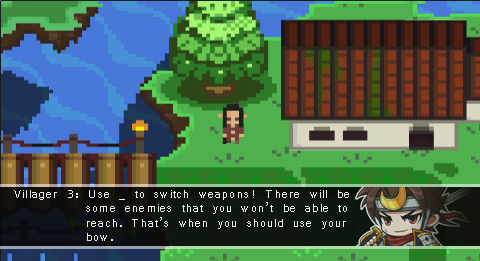
<style>
.page{position:relative;width:480px;height:261px}
.page>*{position:absolute;margin:0}
.t1{font:12px "Vrinda";letter-spacing:0.1em;color:#fefefe}
</style>
<div class="page">
<p class="t1" style="left:14px;top:190px;width:335px;height:51px;opacity:0.9">Villager 3: Use _ to switch weapons! There will be <br>  some enemies that you won’t be able to <br>  reach. That’s when you should use your <br>  bow.</p>
</div>
